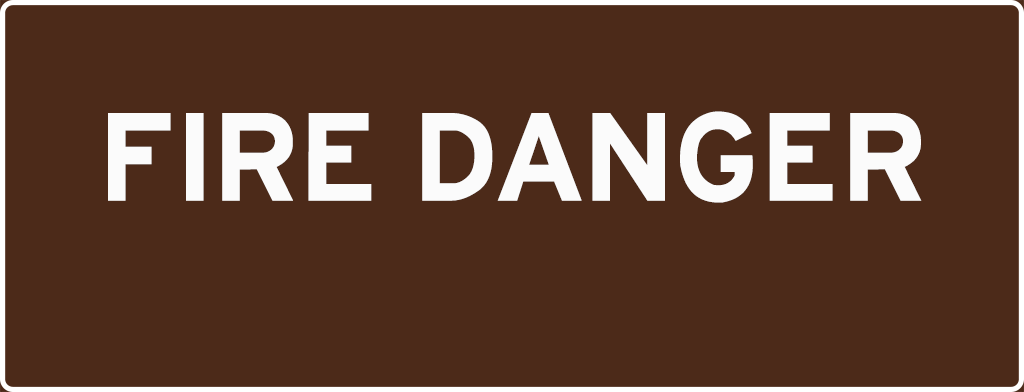
<style>
.page{position:relative;width:1024px;height:392px;background:#4c2a19}
.page>*{position:absolute;margin:0}
.t1{font:132.5px "HittheRoad";color:#fbfbfb}
</style>
<div class="page">
<p class="t1" style="left:108px;top:111px;width:814px;height:92px">FIRE DANGER</p>
</div>
